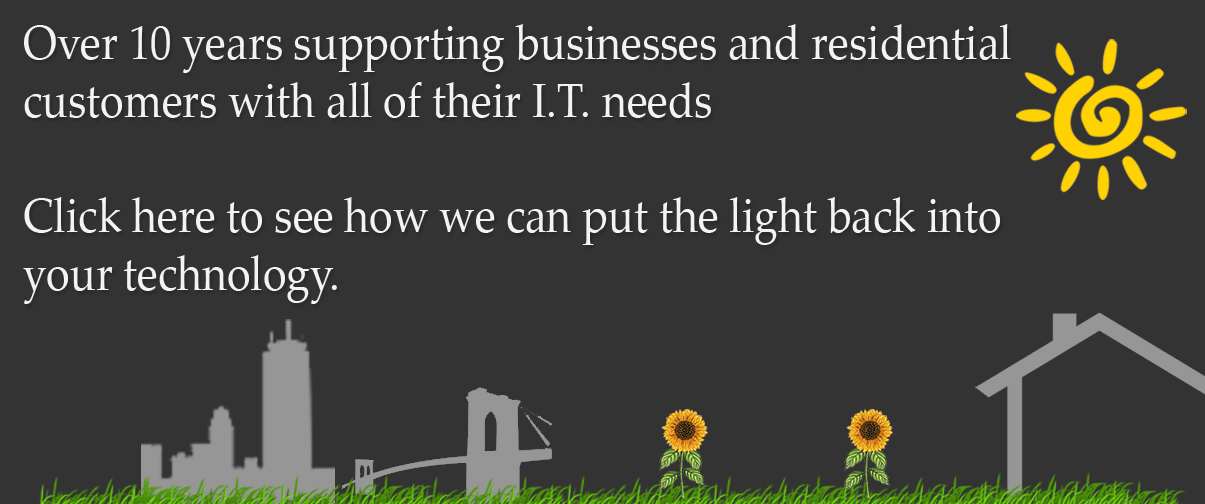
<style>
.page{position:relative;width:1205px;height:504px;background:#333333}
.page>*{position:absolute;margin:0}
.t1{font:48px "PalatinoLinotype-Roman";color:#f3f3f3;scale:0.9 1}
</style>
<div class="page">
<p class="t1" style="left:23px;top:24px;width:988px;height:280px">Over 10 years supporting businesses and residential customers with all of their I.T. needs<br><br>Click here to see how we can put the light back into your technology.</p>
</div>
